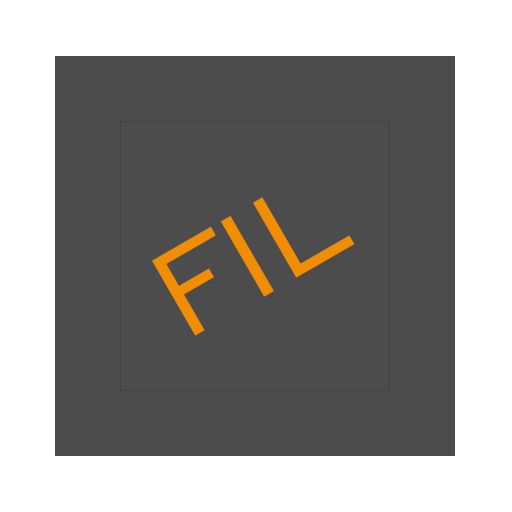
<style>
.page{position:relative;width:512px;height:512px;background:#4c4c4c}
.page>*{position:absolute;margin:0}
.t1{font:160px "420-CAI978";color:#f18d00}
</style>
<div class="page">
<p class="t1" style="left:152px;top:197px;width:203px;height:139px;rotate:-30deg">FIL</p>
</div>
